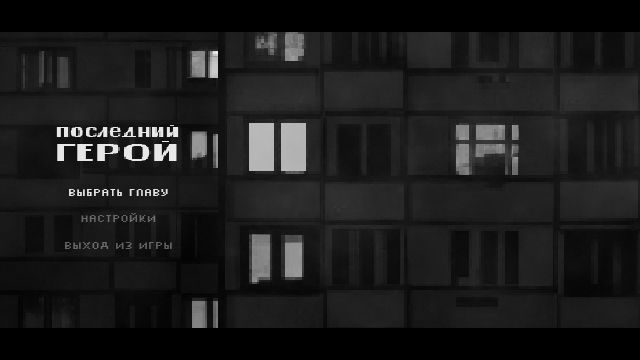
<style>
.page{position:relative;width:640px;height:360px}
.page>*{position:absolute;margin:0}
.t1{font:10.6px "Silkscreen[RusbyMr.Enot]";color:#e3e3e3;scale:1.1 1}
.t2{font:10.6px "Silkscreen[RusbyMr.Enot]";color:#686868;scale:1.1 1}
.t3{font:10.6px "Silkscreen[RusbyMr.Enot]";color:#646464;scale:1.1 1}
</style>
<div class="page">
<p class="t1" style="left:69px;top:189px;width:99px;height:7px">выбрать главу</p>
<p class="t1" style="left:69px;top:189px;width:99px;height:7px">выбрать главу</p>
<p class="t2" style="left:81px;top:213px;width:75px;height:9px">настройки</p>
<p class="t3" style="left:65px;top:242px;width:107px;height:7px">выход из игры</p>
</div>
